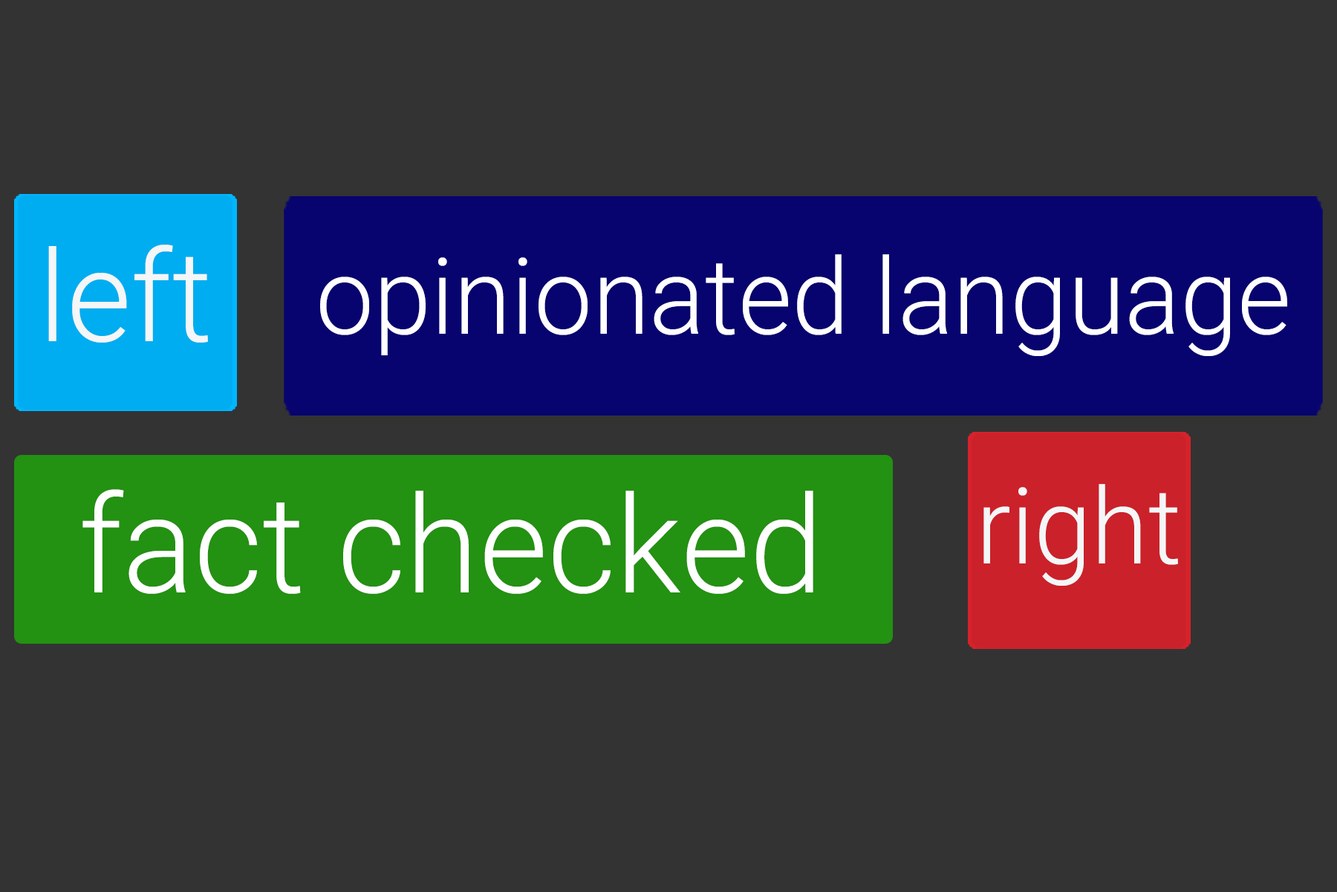
<style>
.page{position:relative;width:1337px;height:892px;background:#333333}
.page>*{position:absolute;margin:0}
.t1{font:126.9px "Roboto-Light";color:#f4f6f7}
.t2{font:105.7px "Roboto-Light";color:#ffffff}
.t3{font:105.7px "Roboto-Light";color:#f4f6f7}
.t4{font:135.5px "Roboto-Light";color:#ffffff}
</style>
<div class="page">
<p class="t1" style="left:48px;top:244px;width:160px;height:99px">left</p>
<p class="t2" style="left:320px;top:254px;width:968px;height:102px">opinionated language</p>
<p class="t3" style="left:984px;top:484px;width:194px;height:101px">right</p>
<p class="t4" style="left:82px;top:489px;width:732px;height:105px">fact checked</p>
</div>
